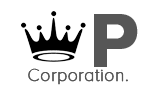
<style>
.page{position:relative;width:155px;height:100px;background:#ffffff}
.page>*{position:absolute;margin:0}
.t1{font:76.1px "ProximaNova-Bold";color:#565656;font-weight:bold}
.t2{font:18px "ProximaNovaT-Thin";color:#565656;font-weight:bold}
</style>
<div class="page">
<p class="t1" style="left:94px;top:14px;width:44px;height:53px">P</p>
<p class="t2" style="left:28px;top:68px;width:100px;height:17px">Corporation.</p>
</div>
